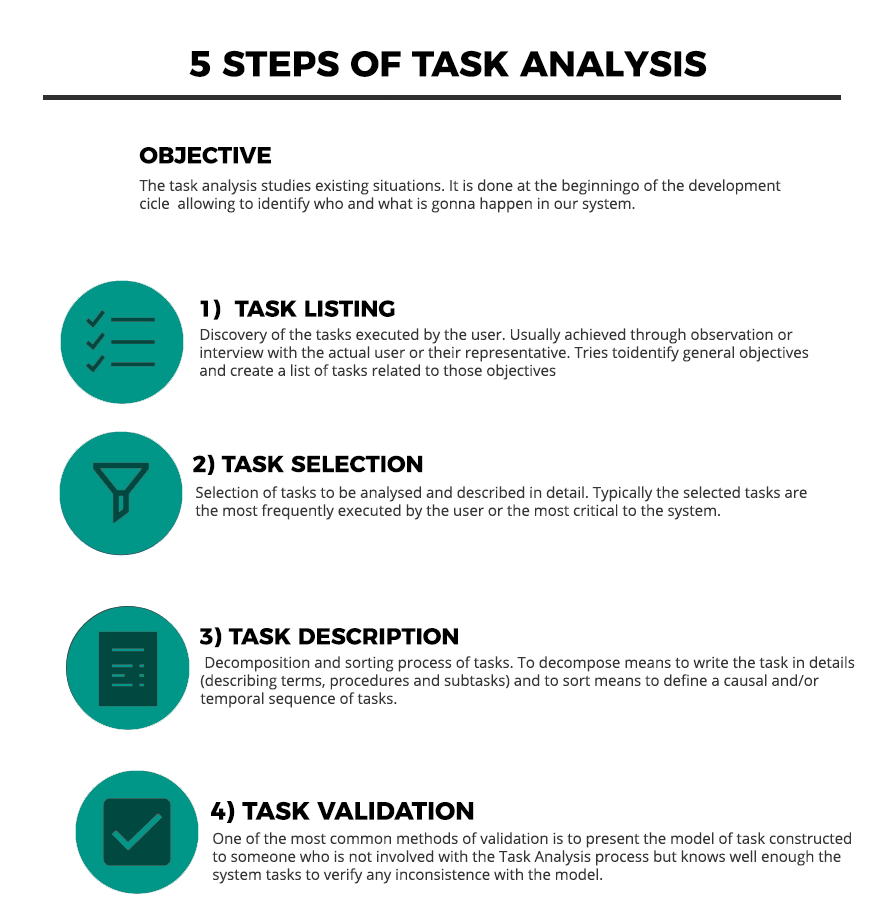
<style>
.page{position:relative;width:880px;height:907px;background:#ffffff}
.page>*{position:absolute;margin:0}
.t1{font:36px "Montserrat-Bold";color:#000000}
.t2{font:23px "Montserrat-Bold";color:#000000}
.t3{font:15px/18px "OpenSans";color:#353535}
.t4{font:25px "Montserrat-Bold";color:#000000}
</style>
<div class="page">
<p class="t1" style="left:189px;top:50px;width:518px;height:27px">5 STEPS OF TASK ANALYSIS</p>
<p class="t2" style="left:139px;top:147px;width:132px;height:17px">OBJECTIVE</p>
<p class="t3" style="left:139px;top:179px;width:642px;height:34px">The task analysis studies existing situations. It is done at the beginningo of the development<br>cicle  allowing to identify who and what is gonna happen in our system.</p>
<p class="t2" style="left:200px;top:299px;width:195px;height:21px">1)  TASK LISTING</p>
<p class="t3" style="left:200px;top:328px;width:609px;height:52px">Discovery of the tasks executed by the user. Usually achieved through observation or <br>interview with the actual user or their representative. Tries toidentify general objectives <br>and create a list of tasks related to those objectives</p>
<p class="t2" style="left:192px;top:454px;width:231px;height:21px">2) TASK SELECTION</p>
<p class="t3" style="left:195px;top:486px;width:612px;height:34px">Selection of tasks to be analysed and described in detail. Typically the selected tasks are<br>the most frequently executed by the user or the most critical to the system.</p>
<p class="t2" style="left:199px;top:627px;width:259px;height:21px">3) TASK DESCRIPTION</p>
<p class="t3" style="left:200px;top:656px;width:655px;height:52px">Decomposition and sorting process of tasks. To decompose means to write the task in details <br>(describing terms, procedures and subtasks) and to sort means to define a causal and/or<br>temporal sequence of tasks.</p>
<p class="t4" style="left:211px;top:801px;width:263px;height:22px">4) TASK VALIDATION</p>
<p class="t3" style="left:212px;top:832px;width:639px;height:52px">One of the most common methods of validation is to present the model of task constructed<br>to someone who is not involved with the Task Analysis process but knows well enough the<br>system tasks to verify any inconsistence with the model.</p>
</div>
